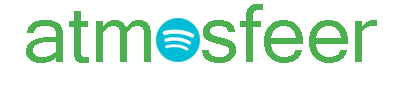
<style>
.page{position:relative;width:400px;height:85px;background:#ffffff}
.page>*{position:absolute;margin:0}
.t1{font:80px "MicrosoftSansSerif";color:#4caf50}
</style>
<div class="page">
<p class="t1" style="left:26px;top:4px;width:351px;height:59px">atm  sfeer</p>
</div>
